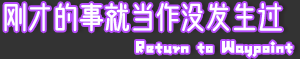
<style>
.page{position:relative;width:300px;height:59px;background:#333333}
.page>*{position:absolute;margin:0}
.t1{font:30px "WenCang-Regular";color:#ffffff}
.t2{font:24px "AaFKH";color:#ffffff}
</style>
<div class="page">
<p class="t1" style="left:4px;top:3px;width:278px;height:29px">刚才的事就当作没发生过</p>
<p class="t2" style="left:136px;top:41px;width:157px;height:16px">Return to Waypoint</p>
</div>
